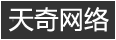
<style>
.page{position:relative;width:116px;height:40px;background:#333333}
.page>*{position:absolute;margin:0}
.t1{font:25px "MicrosoftYaHeiUI";letter-spacing:0.001em;color:#ffffff}
</style>
<div class="page">
<p class="t1" style="left:9px;top:7px;width:100px;height:25px">天奇网络</p>
</div>
